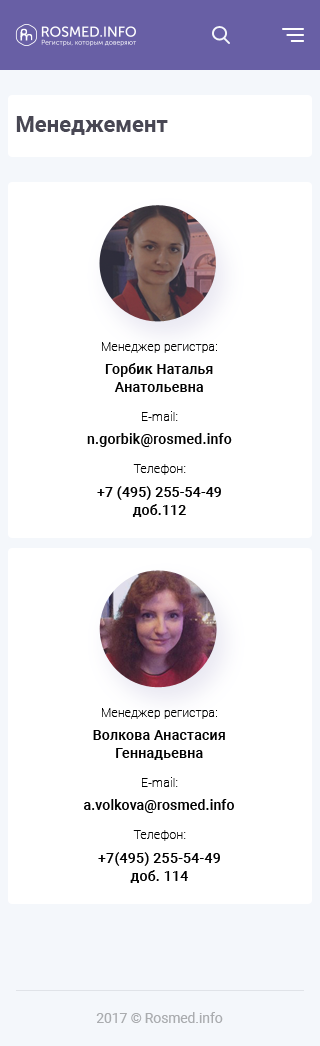
<style>
.page{position:relative;width:320px;height:1046px;background:#ffffff}
.page>*{position:absolute;margin:0}
.t1{font:22px "Roboto-Bold";color:#484753}
.t2{font:12px "Roboto-Thin";letter-spacing:0.015em;color:#000000}
.t3{font:14px/18px "Roboto-Medium";letter-spacing:0.015em;color:#000000}
.t4{font:12.4px "Roboto-Thin";letter-spacing:0.015em;color:#000000}
.t5{font:14.2px "Roboto-Medium";letter-spacing:0.015em;color:#000000}
.t6{font:12.3px "Roboto-Thin";letter-spacing:0.015em;color:#000000}
.t7{font:13.8px/18px "Roboto-Medium";letter-spacing:0.015em;color:#000000}
.t8{font:14px "Roboto-Medium";letter-spacing:0.015em;color:#000000}
.t9{font:14.3px/18px "Roboto-Medium";letter-spacing:0.015em;color:#000000}
.t10{font:14.1px "Roboto-Regular";color:#aaacaf}
</style>
<div class="page">
<p class="t1" style="left:16px;top:116px;width:152px;height:19px">Менеджемент</p>
<p class="t2" style="left:102px;top:342px;width:115px;height:11px">Менеджер регистра:</p>
<p class="t3" style="left:105px;top:363px;width:108px;height:29px;text-align:center">Горбик Наталья<br>Анатольевна</p>
<p class="t4" style="left:142px;top:411px;width:36px;height:10px">E-mail:</p>
<p class="t5" style="left:87px;top:433px;width:145px;height:14px">n.gorbik@rosmed.info</p>
<p class="t6" style="left:133px;top:464px;width:53px;height:11px">Телефон:</p>
<p class="t7" style="left:97px;top:486px;width:124px;height:31px;text-align:center">+7 (495) 255-54-49<br>доб.112</p>
<p class="t2" style="left:102px;top:708px;width:115px;height:11px">Менеджер регистра:</p>
<p class="t3" style="left:93px;top:730px;width:132px;height:30px;text-align:center">Волкова Анастасия<br>Геннадьевна</p>
<p class="t4" style="left:142px;top:777px;width:36px;height:10px">E-mail:</p>
<p class="t8" style="left:84px;top:799px;width:150px;height:14px">a.volkova@rosmed.info</p>
<p class="t6" style="left:133px;top:830px;width:53px;height:11px">Телефон:</p>
<p class="t9" style="left:98px;top:852px;width:122px;height:31px;text-align:center">+7(495) 255-54-49<br>доб. 114</p>
<p class="t10" style="left:96px;top:1012px;width:127px;height:11px">2017 © Rosmed.info</p>
</div>
